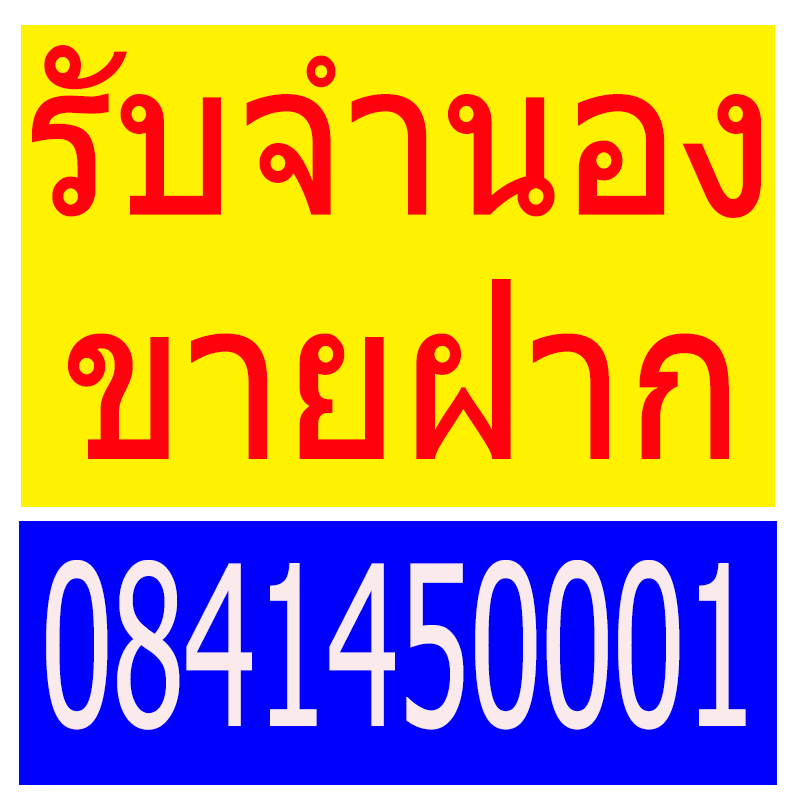
<style>
.page{position:relative;width:800px;height:800px;background:#fff200}
.page>*{position:absolute;margin:0}
.t1{font:214.9px "Tahoma";color:#ff020e;scale:0.92 1}
.t2{font:223.3px "Tahoma";color:#ff020e;scale:0.9 1}
.t3{font:223.3px "Tahoma";color:#faeaeb;scale:0.59 1}
</style>
<div class="page">
<p class="t1" style="left:32px;top:45px;width:729px;height:173px">รับจำนอง</p>
<p class="t2" style="left:68px;top:279px;width:661px;height:180px">ขายฝาก</p>
<p class="t3" style="left:46px;top:560px;width:700px;height:170px">0841450001</p>
</div>
